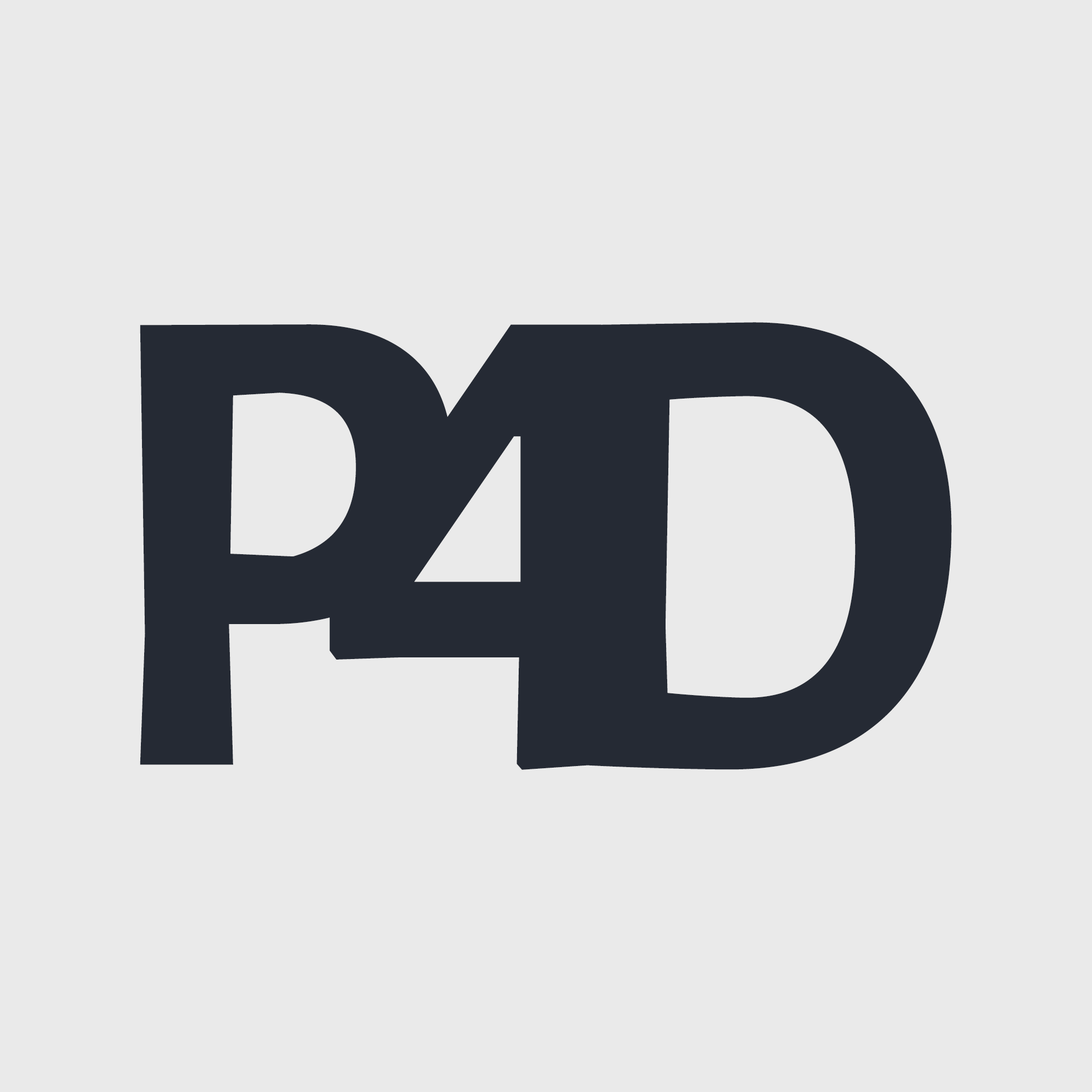
<style>
.page{position:relative;width:1092px;height:1092px;background:#eaeaea}
.page>*{position:absolute;margin:0}
.t1{font:682.5px "AlegreyaSans-Bold";letter-spacing:-0.22em;color:#252a34}
.t2{font:739.4px "AlegreyaSans-Bold";letter-spacing:-0.22em;color:#252a34}
</style>
<div class="page">
<p class="t1" style="left:140px;top:322px;width:812px;height:448px">P<span class="t2">4</span>D</p>
</div>
